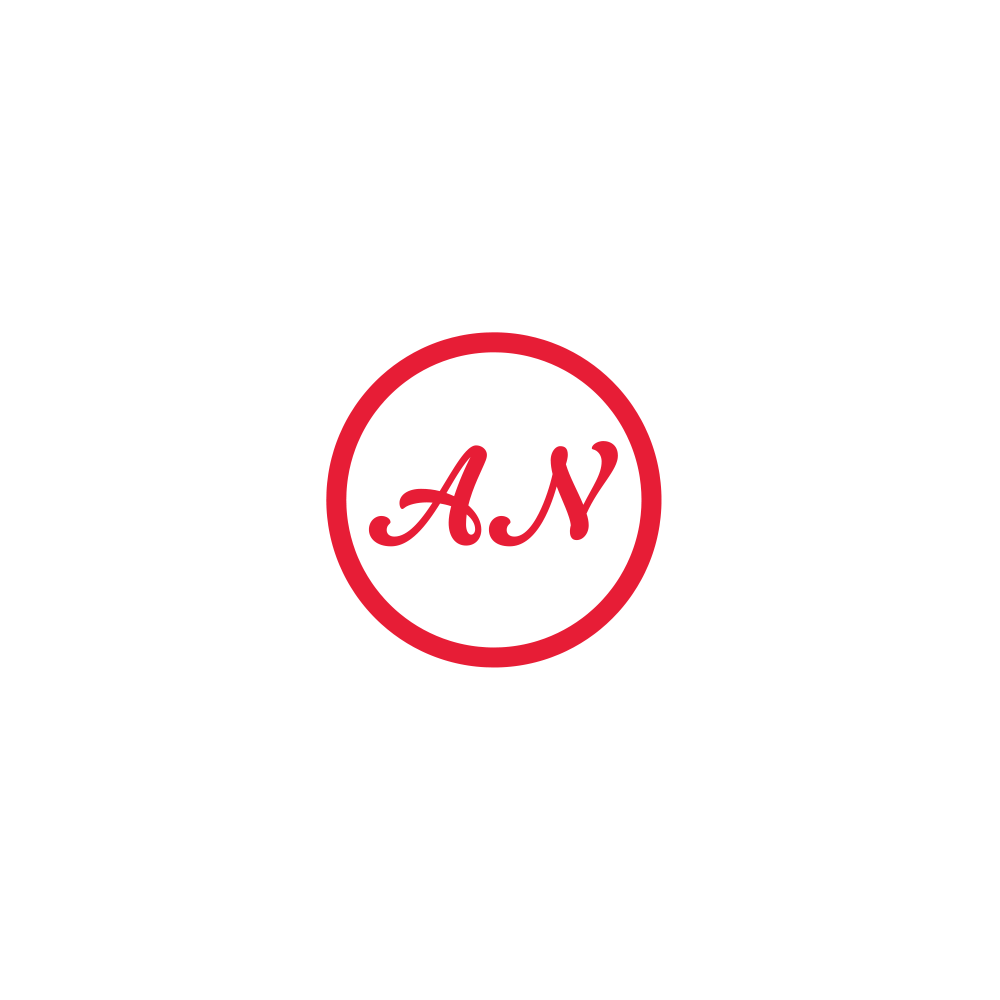
<style>
.page{position:relative;width:1000px;height:1000px;background:#ffffff}
.page>*{position:absolute;margin:0}
.t1{font:127.4px "GelatoLuxe";letter-spacing:0.035em;color:#e71d36;text-transform:uppercase}
</style>
<div class="page">
<p class="t1" style="left:368px;top:441px;width:250px;height:106px">An</p>
</div>
